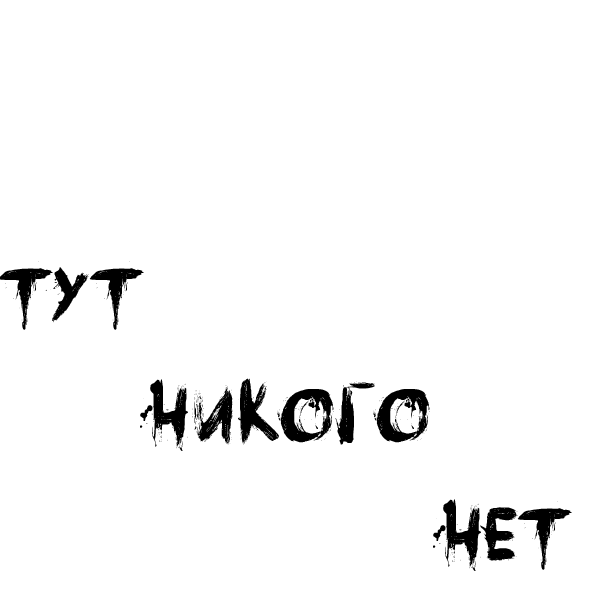
<style>
.page{position:relative;width:600px;height:600px;background:#ffffff}
.page>*{position:absolute;margin:0}
.t1{font:100px "DKFaceYourFearsRUSBYLYAJK";color:#000000}
</style>
<div class="page">
<p class="t1" style="left:0px;top:261px;width:572px;height:310px">ТУТ <br>    НИКОГО <br>    НЕТ</p>
</div>
